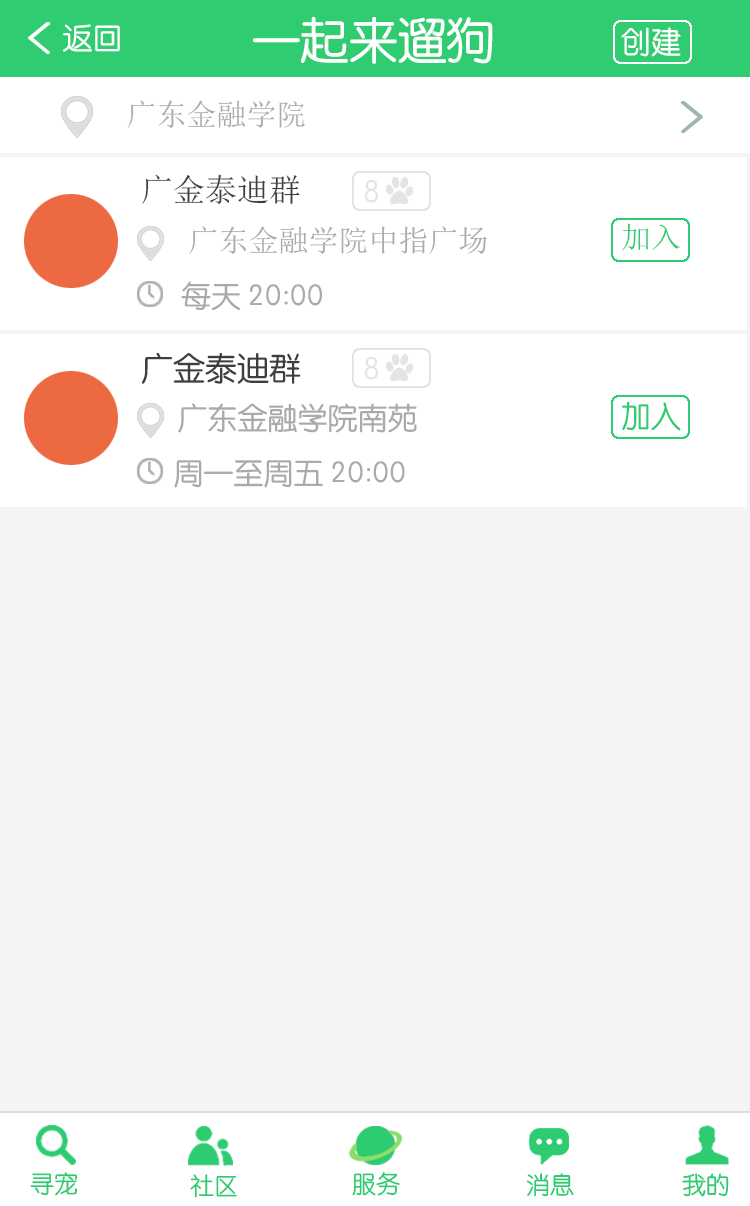
<style>
.page{position:relative;width:750px;height:1206px;background:#f4f4f4}
.page>*{position:absolute;margin:0}
.t1{font:48.7px "STYuanti-SC-Regular";color:#ffffff}
.t2{font:30px "STYuanti-SC-Regular";color:#ffffff}
.t3{font:30px "SimSun";color:#aaaaaa}
.t4{font:32px "SimSun";color:#3e3e3e}
.t5{font:30px "SimSun";color:#2ecc71}
.t6{font:30px "STYuanti-SC-Regular";color:#aaaaaa}
.t7{font:32px "STYuanti-SC-Regular";color:#3e3e3e}
.t8{font:32px "STYuanti-SC-Regular";color:#e4e4e4}
.t9{font:30px "STYuanti-SC-Regular";color:#2ecc71}
.t10{font:24px "STYuanti-SC-Regular";color:#2ecc71}
.t11{font:24px "STYuanti-SC-Regular"}
</style>
<div class="page">
<p class="t1" style="left:253px;top:17px;width:240px;height:47px">一起来遛狗</p>
<p class="t2" style="left:63px;top:24px;width:57px;height:28px">返回</p>
<p class="t2" style="left:621px;top:27px;width:60px;height:30px">创建</p>
<p class="t3" style="left:127px;top:100px;width:178px;height:28px">广东金融学院</p>
<p class="t4" style="left:142px;top:174px;width:158px;height:31px">广金泰迪群</p>
<p class="t3" style="left:189px;top:226px;width:298px;height:28px">广东金融学院中指广场</p>
<p class="t5" style="left:622px;top:223px;width:58px;height:28px">加入</p>
<p class="t6" style="left:181px;top:281px;width:141px;height:30px">每天 20:00</p>
<p class="t7" style="left:141px;top:352px;width:160px;height:32px">广金泰迪群</p>
<p class="t8" style="left:364px;top:356px;width:14px;height:24px">8</p>
<p class="t9" style="left:622px;top:401px;width:59px;height:30px">加入</p>
<p class="t6" style="left:178px;top:403px;width:239px;height:30px">广东金融学院南苑</p>
<p class="t6" style="left:174px;top:460px;width:231px;height:28px">周一至周五 20:00</p>
<p class="t10" style="left:30px;top:1172px;width:48px;height:24px">寻宠</p>
<p class="t10" style="left:190px;top:1174px;width:47px;height:24px">社区</p>
<p class="t11" style="left:352px;top:1173px;width:48px;height:24px">服务</p>
<p class="t10" style="left:352px;top:1172px;width:48px;height:24px">服务</p>
<p class="t11" style="left:526px;top:1173px;width:47px;height:24px">消息</p>
<p class="t10" style="left:527px;top:1173px;width:47px;height:24px">消息</p>
<p class="t10" style="left:682px;top:1173px;width:47px;height:24px">我的</p>
<p class="t10" style="left:682px;top:1173px;width:47px;height:24px">我的</p>
</div>
